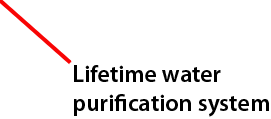
<style>
.page{position:relative;width:271px;height:119px;background:#ffffff}
.page>*{position:absolute;margin:0}
.t1{font:24px "MyriadPro-Semibold";color:#000000}
</style>
<div class="page">
<p class="t1" style="left:74px;top:65px;width:195px;height:52px">Lifetime water<br>purification system</p>
</div>
